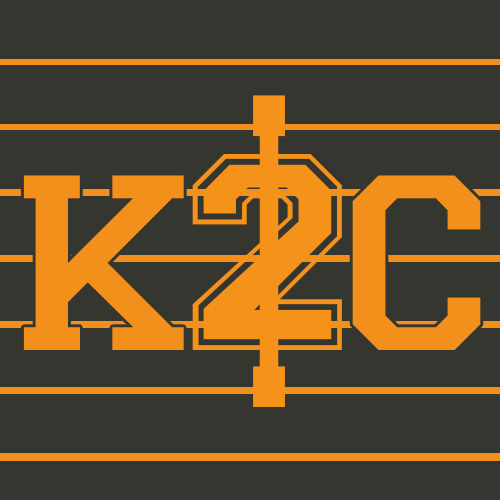
<style>
.page{position:relative;width:500px;height:500px;background:#363631}
.page>*{position:absolute;margin:0}
.t1{font:500px "Varsity-Regular";color:#f5921a;scale:0.32 1}
.t2{font:280px "Varsity-Regular";color:#f5921a}
.t3{font:280px "Varsity-Regular";color:#f3901c}
</style>
<div class="page">
<p class="t1" style="left:253px;top:95px;width:32px;height:312px">ı</p>
<p class="t2" style="left:192px;top:154px;width:150px;height:196px">2</p>
<p class="t3" style="left:23px;top:175px;width:458px;height:175px">k  c</p>
</div>
